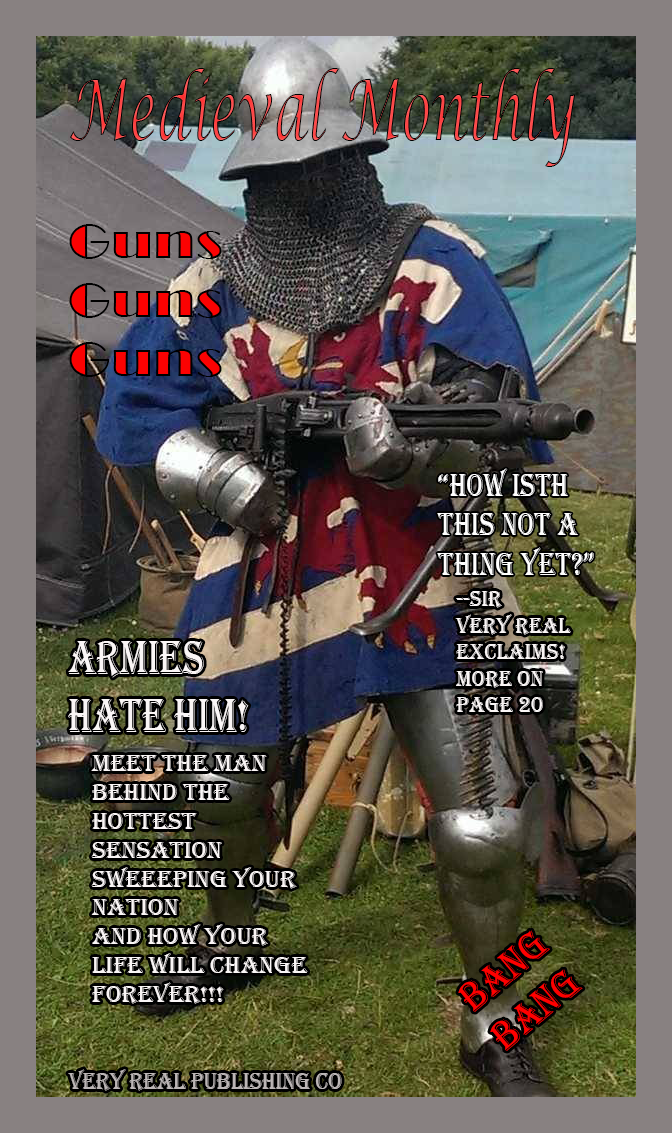
<style>
.page{position:relative;width:672px;height:1133px}
.page>*{position:absolute;margin:0}
.t1{font:84.1px "LucidaCalligraphy-Italic";scale:0.61 1}
.t2{font:49.4px "Broadway";scale:1.14 1}
.t3{font:33.1px "Algerian";color:#ffffff;scale:0.82 1}
.t4{font:22.1px "Algerian";color:#faf6f6;scale:0.97 1}
.t5{font:49.1px "Algerian";color:#faf6f6;scale:0.76 1}
.t6{font:24px "Algerian";color:#faf6f6;scale:1.04 1}
.t7{font:41.9px "Algerian";color:#ff0000;scale:0.9 1}
.t8{font:24px "Algerian";color:#bcb6b6;scale:0.91 1}
</style>
<div class="page">
<p class="t1" style="left:70px;top:68px;width:506px;height:99px">Medieval Monthly</p>
<p class="t2" style="left:69px;top:224px;width:153px;height:153px">Guns <br>Guns <br>Guns</p>
<p class="t3" style="left:437px;top:468px;width:157px;height:107px">“How isth this not a thing yet?”<br>-</p>
<p class="t4" style="left:455px;top:591px;width:116px;height:121px">--sIR <br>VERY REAL EXCLAIMS! mORE ON PAGE 20</p>
<p class="t5" style="left:68px;top:641px;width:181px;height:91px">ARMIES HATE HIM!</p>
<p class="t6" style="left:91px;top:755px;width:217px;height:249px">mEET THE MAN<br>BEHIND THE HOTTEST SENSATION SWEEEPING YOUR NATION<br>AND HOW YOUR LIFE WILL CHANGE FOREVER!!!</p>
<p class="t7" style="left:458px;top:930px;width:125px;height:121px;rotate:-40deg">bANG bANG</p>
<p class="t8" style="left:68px;top:1069px;width:274px;height:22px">vERY REAL PUBLISHING CO</p>
</div>
